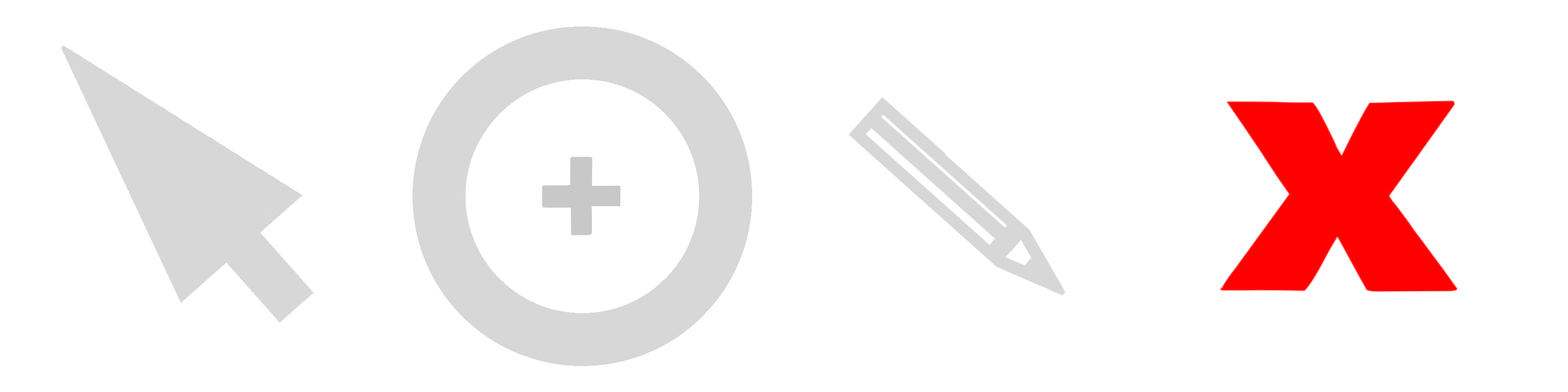
<style>
.page{position:relative;width:1568px;height:392px;background:#ffffff}
.page>*{position:absolute;margin:0}
.t1{font:147px "BowlbyOne-Regular";color:#c8c8c8}
</style>
<div class="page">
<p class="t1" style="left:542px;top:156px;width:79px;height:80px">+</p>
</div>
